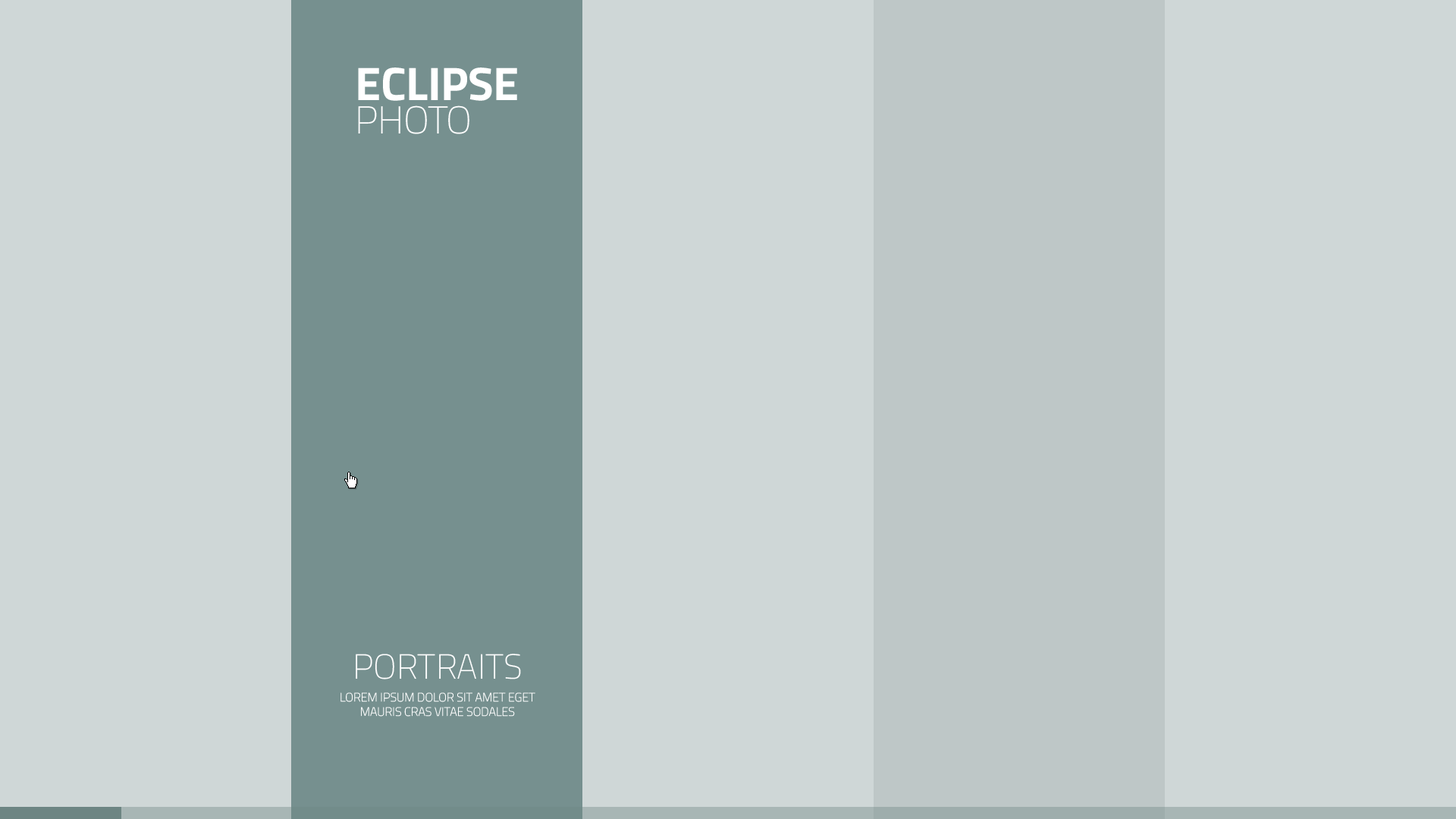
<style>
.page{position:relative;width:1456px;height:819px;background:#cfd7d7}
.page>*{position:absolute;margin:0}
.t1{font:34.9px "TitilliumWeb-Thin";color:#ffffff;text-transform:uppercase}
.t2{font:12.1px "TitilliumWeb-Thin";color:#ffffff;text-transform:uppercase}
</style>
<div class="page">
<p class="t1" style="left:356px;top:654px;width:165px;height:25px">Portraits</p>
<p class="t2" style="left:340px;top:692px;width:195px;height:25px;text-align:center">lorem ipsum dolor sit amet eget<br>mauris cras vitae sodales</p>
</div>
